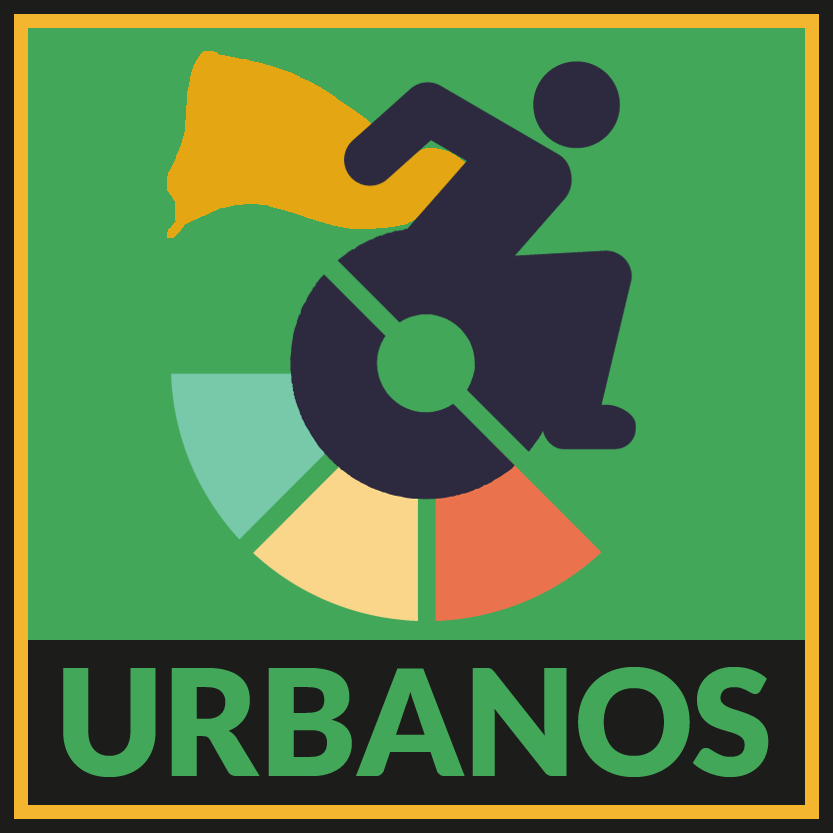
<style>
.page{position:relative;width:833px;height:833px;background:#42a759}
.page>*{position:absolute;margin:0}
.t1{font:146.5px "Lato-Black";color:#42a759}
</style>
<div class="page">
<p class="t1" style="left:63px;top:667px;width:706px;height:110px">URBANOS</p>
</div>
